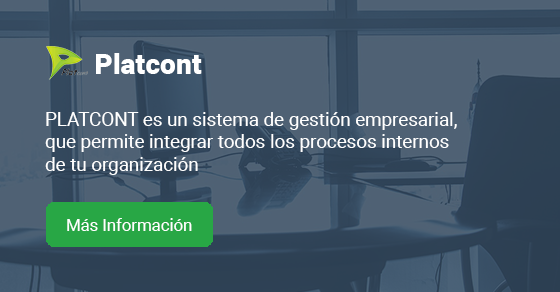
<style>
.page{position:relative;width:560px;height:292px;background:#4f6174}
.page>*{position:absolute;margin:0}
.t1{font:28.3px "Roboto-Black";color:#ffffff}
.t2{font:18.8px "Roboto-Regular";color:#ffffff}
.t3{font:16.7px "Roboto-Regular";color:#ffffff}
</style>
<div class="page">
<p class="t1" style="left:96px;top:53px;width:106px;height:21px">Platcont</p>
<p class="t2" style="left:45px;top:112px;width:412px;height:63px">PLATCONT es un sistema de gestión empresarial, <br>que permite integrar todos los procesos internos <br>de tu organización</p>
<p class="t3" style="left:67px;top:218px;width:125px;height:13px">Más Información</p>
</div>
